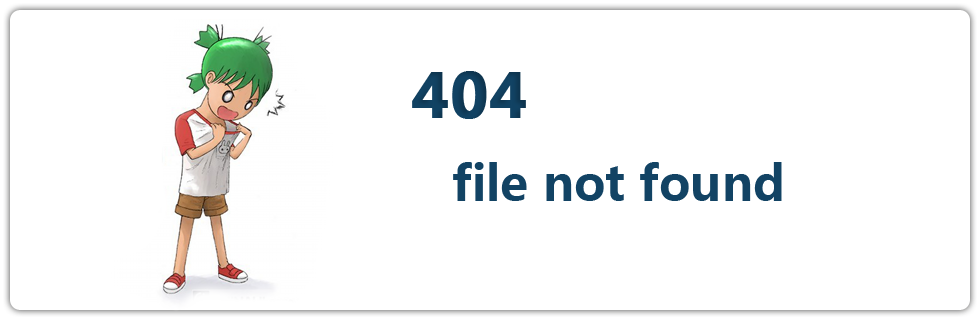
<style>
.page{position:relative;width:980px;height:320px;background:#ffffff}
.page>*{position:absolute;margin:0}
.t1{font:60px "MicrosoftYaHei-Bold";color:#124364;font-weight:bold}
.t2{font:48px "MicrosoftYaHei-Bold";color:#124364}
</style>
<div class="page">
<p class="t1" style="left:412px;top:71px;width:114px;height:48px">404</p>
<p class="t2" style="left:453px;top:162px;width:329px;height:39px">file not found</p>
</div>
